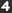
<style>
.page{position:relative;width:12px;height:13px}
.page>*{position:absolute;margin:0}
.t1{font:13.9px "K2D-ExtraBold";color:#ffffff}
</style>
<div class="page">
<p class="t1" style="left:1px;top:1px;width:9px;height:11px">4</p>
</div>
